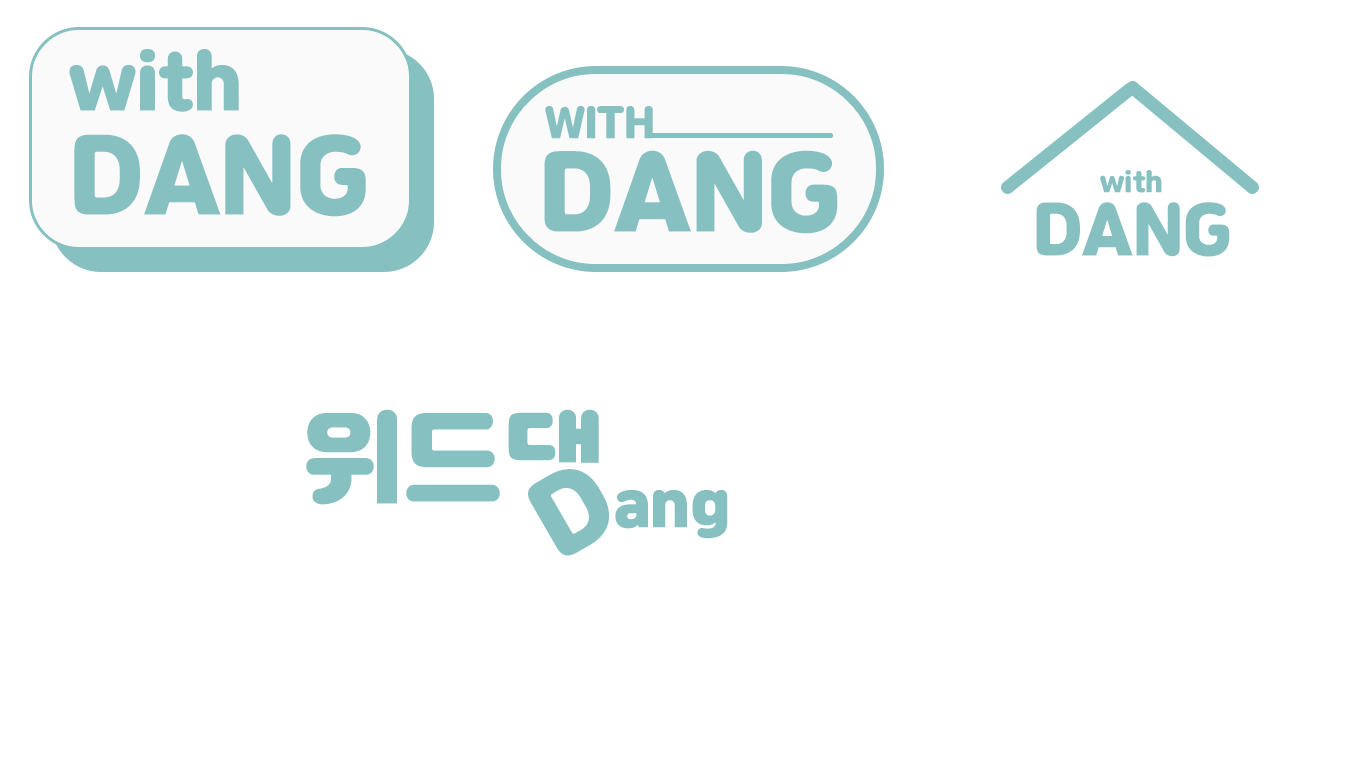
<style>
.page{position:relative;width:1366px;height:768px;background:#ffffff}
.page>*{position:absolute;margin:0}
.t1{font:72.8px/82.8px "JalnanOTF";color:#87c0c1}
.t2{font:23.8px/82.8px "JalnanOTF";color:#87c0c1}
.t3{font:40px/45px "JalnanOTF";color:#87c0c1}
.t4{font:40px/45px "JalnanOTF";letter-spacing:-0.13em;color:#87c0c1}
.t5{font:100px/45px "JalnanOTF";color:#87c0c1}
.t6{font:26.3px/32px "JalnanOTF";color:#87c0c1}
.t7{font:65.8px/32px "JalnanOTF";color:#87c0c1}
.t8{font:100px "JalnanOTF";color:#87c0c1}
.t9{font:60px "JalnanOTF";color:#87c0c1}
</style>
<div class="page">
<p class="t1" style="left:69px;top:49px;width:297px;height:168px">with<br><span class="t2">DANG</span></p>
<p class="t3" style="left:544px;top:106px;width:294px;height:128px"><span class="t4"> </span>WITH<br><span class="t5">DANG</span></p>
<p class="t6" style="left:1036px;top:170px;width:194px;height:87px;text-align:center">with<br><span class="t7">DANG</span></p>
<p class="t8" style="left:306px;top:409px;width:294px;height:96px">위드댕</p>
<p class="t8" style="left:528px;top:469px;width:81px;height:87px;rotate:-30deg">D</p>
<p class="t9" style="left:615px;top:489px;width:113px;height:50px">ang</p>
</div>
